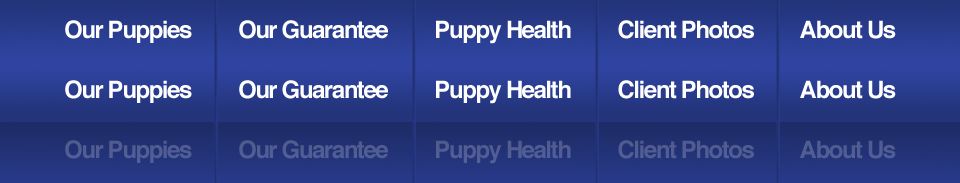
<style>
.page{position:relative;width:960px;height:183px}
.page>*{position:absolute;margin:0}
.t1{font:24px "Helvetica-Bold";letter-spacing:-0.06em;color:#ffffff}
.t2{font:24px "Helvetica-Bold";letter-spacing:-0.06em;color:#515d92}
</style>
<div class="page">
<p class="t1" style="left:65px;top:20px;width:831px;height:24px">Our Puppies         Our Guarantee         Puppy Health         Client Photos         About Us</p>
<p class="t1" style="left:65px;top:80px;width:831px;height:24px">Our Puppies         Our Guarantee         Puppy Health         Client Photos         About Us</p>
<p class="t2" style="left:65px;top:140px;width:831px;height:24px">Our Puppies         Our Guarantee         Puppy Health         Client Photos         About Us</p>
</div>
